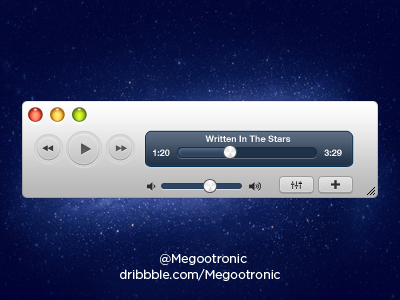
<style>
.page{position:relative;width:400px;height:300px}
.page>*{position:absolute;margin:0}
.t1{font:9px "HelveticaNeueLTCom-Bd";color:#ffffff}
.t2{font:12px "Gotham-Book";color:#ffffff}
</style>
<div class="page">
<p class="t1" style="left:205px;top:135px;width:86px;height:7px">Written In The Stars</p>
<p class="t1" style="left:153px;top:149px;width:17px;height:7px">1:20</p>
<p class="t1" style="left:324px;top:149px;width:18px;height:7px">3:29</p>
<p class="t2" style="left:160px;top:254px;width:87px;height:11px">@Megootronic</p>
<p class="t2" style="left:120px;top:269px;width:160px;height:12px">dribbble.com/Megootronic</p>
</div>
